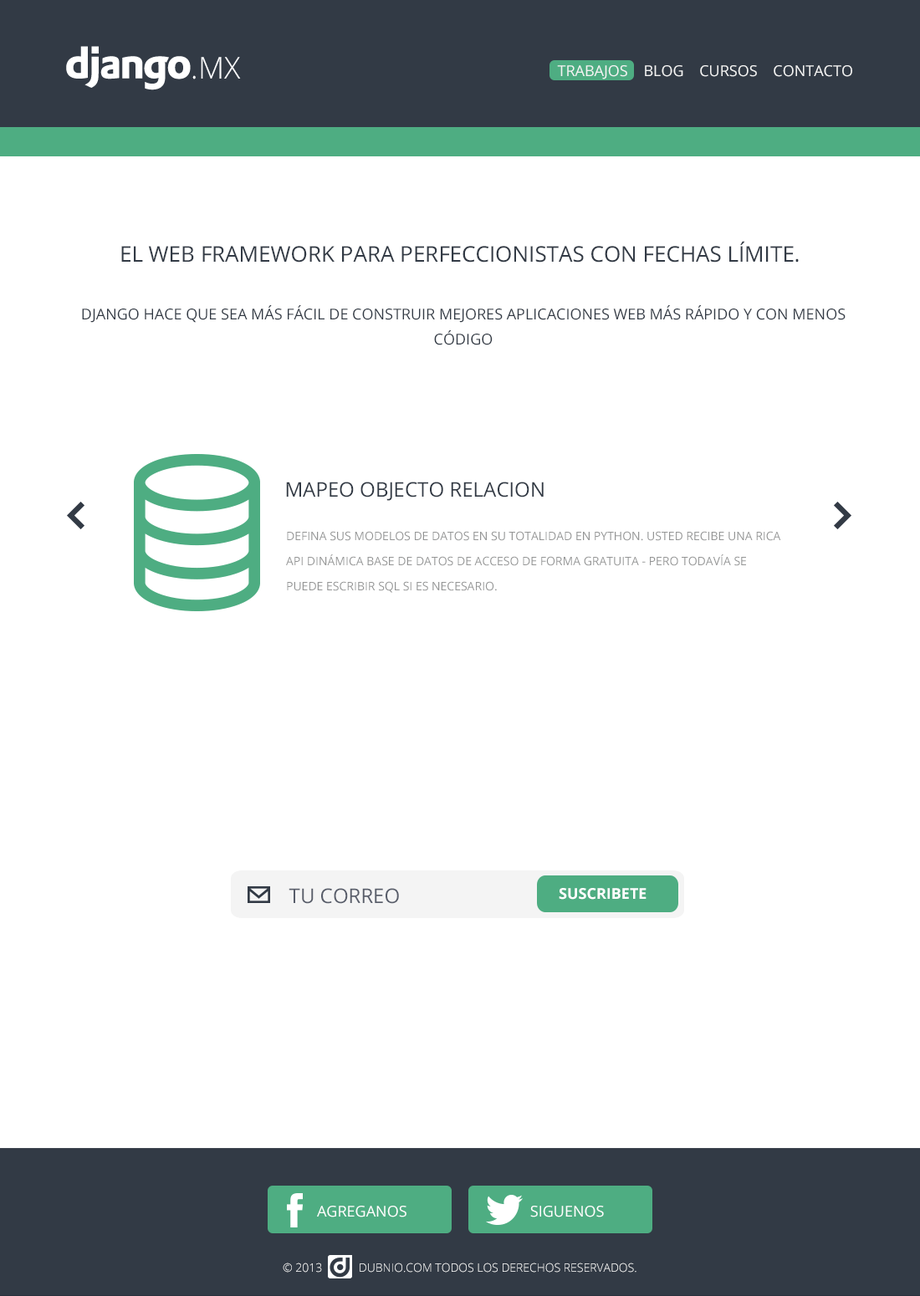
<style>
.page{position:relative;width:920px;height:1296px;background:#ffffff}
.page>*{position:absolute;margin:0}
.t1{font:30.1px "OpenSans-Light";color:#fbfcfe;text-transform:uppercase}
.t2{font:30.1px "OpenSans-Light";color:#fefeff;text-transform:uppercase}
.t3{font:15.1px "OpenSans";color:#f4f4f4;text-transform:uppercase}
.t4{font:21.7px "OpenSans";color:#323a45;text-transform:uppercase}
.t5{font:15.1px/25.1px "OpenSans";color:#323a45;text-transform:uppercase}
.t6{font:20.1px "OpenSans";color:#323a45;text-transform:uppercase}
.t7{font:11.7px/25.1px "OpenSans";color:#949595;text-transform:uppercase}
.t8{font:20.1px "OpenSans";color:#585d6a;text-transform:uppercase}
.t9{font:15.1px "OpenSans-Bold";color:#ffffff;text-transform:uppercase}
.t10{font:15.1px "OpenSans";color:#ffffff;text-transform:uppercase}
.t11{font:11.7px "OpenSans-Light";color:#ffffff;text-transform:uppercase}
</style>
<div class="page">
<p class="t1" style="left:192px;top:57px;width:49px;height:22px"><span class="t2">.</span>MX</p>
<p class="t3" style="left:557px;top:65px;width:295px;height:14px">TRABAJOS    BLOG    CURSOS    CONTACTO</p>
<p class="t4" style="left:121px;top:241px;width:678px;height:22px">El WEB framework para perfeccionistas con fechas límite.</p>
<p class="t5" style="left:82px;top:305px;width:763px;height:40px;text-align:center">Django hace que sea más fácil de construir mejores aplicaciones web más rápido y con menos código</p>
<p class="t6" style="left:286px;top:482px;width:258px;height:19px">MAPEO OBJECTO RELACION</p>
<p class="t7" style="left:286px;top:531px;width:495px;height:62px">Defina sus modelos de datos en su totalidad en Python. Usted recibe una rica API dinámica base de datos de acceso de forma gratuita - pero todavía se puede escribir SQL si es necesario.</p>
<p class="t8" style="left:289px;top:888px;width:110px;height:16px">Tu correo</p>
<p class="t9" style="left:559px;top:888px;width:87px;height:12px">suscribete</p>
<p class="t10" style="left:317px;top:1206px;width:89px;height:12px">Agreganos</p>
<p class="t10" style="left:530px;top:1206px;width:74px;height:12px">SIGUENOS</p>
<p class="t11" style="left:283px;top:1263px;width:353px;height:10px">© 2013            dubnio.com Todos los derechos reservados.</p>
</div>
